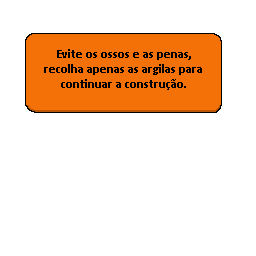
<style>
.page{position:relative;width:256px;height:256px;background:#ffffff}
.page>*{position:absolute;margin:0}
.t1{font:12.5px "Calibri-Bold";color:#000000}
</style>
<div class="page">
<p class="t1" style="left:44px;top:49px;width:158px;height:41px;text-align:center">Evite os ossos e as penas, recolha apenas as argilas para continuar a construção.</p>
</div>
